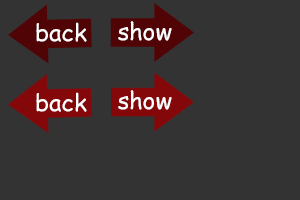
<style>
.page{position:relative;width:300px;height:200px;background:#333333}
.page>*{position:absolute;margin:0}
.t1{font:23.4px "ComicSansMS";color:#ffffff}
</style>
<div class="page">
<p class="t1" style="left:36px;top:22px;width:51px;height:20px">back</p>
<p class="t1" style="left:118px;top:21px;width:54px;height:20px">show</p>
<p class="t1" style="left:36px;top:92px;width:51px;height:20px">back</p>
<p class="t1" style="left:118px;top:90px;width:54px;height:20px">show</p>
</div>
